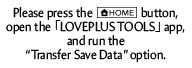
<style>
.page{position:relative;width:192px;height:68px;background:#ffffff}
.page>*{position:absolute;margin:0}
.t1{font:13.2px "Amira-Roman";color:#000000;scale:0.91 1}
.t2{font:13.2px "KozGoPr6N-Regular";color:#000000;scale:0.91 1}
</style>
<div class="page">
<p class="t1" style="left:13px;top:7px;width:165px;height:13px">Please press the                  button,</p>
<p class="t1" style="left:6px;top:20px;width:179px;height:42px;text-align:center">open the <span class="t2">「</span>LOVEPLUS TOOLS<span class="t2">」</span> app, and run the<br>“Transfer Save Data” option.</p>
</div>
